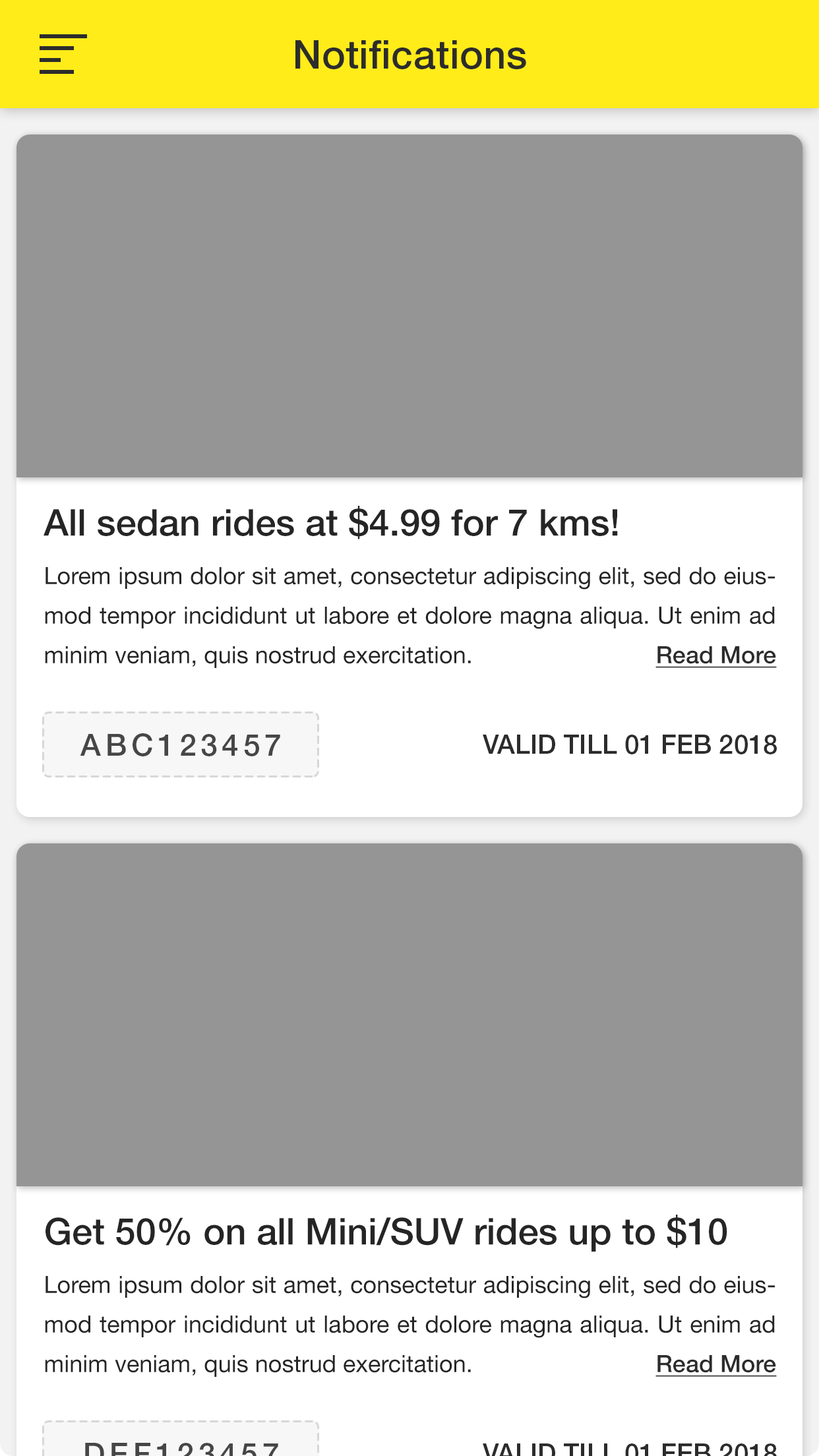
<style>
.page{position:relative;width:819px;height:1456px;background:#959595}
.page>*{position:absolute;margin:0}
.t1{font:39.6px "HelveticaNeueLTStd-Md";letter-spacing:0.01em;color:#2c2c2c}
.t2{font:36.9px "HelveticaNeueLTStd-Md";color:#252525}
.t3{font:23.7px/39.6px "HelveticaNeueLTStd-Roman";color:#252525}
.t4{font:23.7px "HelveticaNeueLTStd-Md";color:#2c2c2c;text-decoration:underline}
.t5{font:30.3px "HelveticaNeueLTStd-Md";letter-spacing:0.15em;color:#464646}
.t6{font:26.4px "HelveticaNeueLTStd-Md";color:#2c2c2c;text-transform:uppercase}
</style>
<div class="page">
<p class="t1" style="left:295px;top:40px;width:231px;height:29px">Notifications</p>
<p class="t2" style="left:44px;top:506px;width:574px;height:33px">All sedan rides at $4.99 for 7 kms!</p>
<p class="t3" style="left:45px;top:567px;width:730px;height:101px;text-align:justify">Lorem ipsum dolor sit amet, consectetur adipiscing elit, sed do eiusmod tempor incididunt ut labore et dolore magna aliqua. Ut enim ad minim veniam, quis nostrud exercitation.</p>
<p class="t4" style="left:655px;top:646px;width:122px;height:22px">Read More</p>
<p class="t5" style="left:80px;top:733px;width:200px;height:23px">ABC123457</p>
<p class="t6" style="left:483px;top:735px;width:294px;height:19px">Valid till 01 Feb 2018</p>
<p class="t2" style="left:45px;top:1215px;width:682px;height:37px">Get 50% on all Mini/SUV rides up to $10</p>
<p class="t3" style="left:45px;top:1276px;width:730px;height:101px;text-align:justify">Lorem ipsum dolor sit amet, consectetur adipiscing elit, sed do eiusmod tempor incididunt ut labore et dolore magna aliqua. Ut enim ad minim veniam, quis nostrud exercitation.</p>
<p class="t4" style="left:655px;top:1355px;width:122px;height:22px">Read More</p>
</div>
